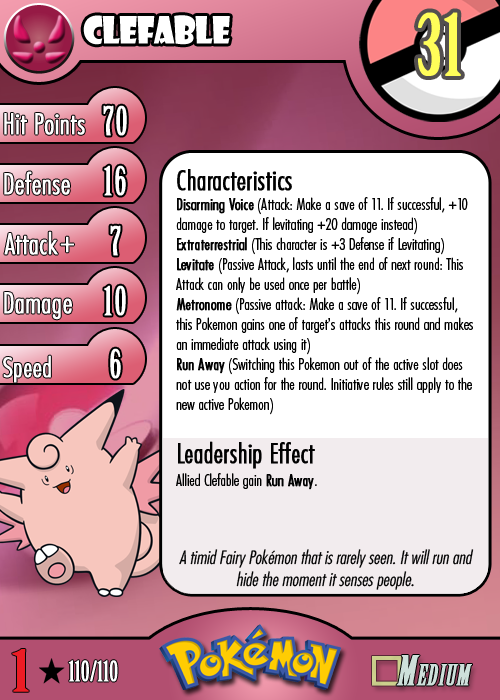
<style>
.page{position:relative;width:500px;height:700px;background:#ffffff}
.page>*{position:absolute;margin:0}
.t1{font:36.7px "ShowcardGothic-Reg";letter-spacing:-0.025em;color:#ffffff;scale:0.91 1}
.t2{font:83.3px "BirchStd";letter-spacing:0.025em;color:#fffd59;font-weight:bold}
.t3{font:27.8px "Futura-CondensedLight";color:#ffffff;font-weight:bold}
.t4{font:38.9px "BirchStd";letter-spacing:0.035em;color:#ffffff;font-weight:bold}
.t5{font:16.7px "FuturaCondensedBQ-Light";color:#010101}
.t6{font:27.8px "FuturaCondensedBQ-Light";color:#010101;font-weight:bold}
.t7{font:16.7px "FuturaCondensedBQ-Light";color:#010101;font-weight:bold}
.t8{font:30.6px "Futura-CondensedLight";color:#ffffff;font-weight:bold}
.t9{font:27.8px "FuturaCondensedBQ-Light";color:#ffffff;font-weight:bold}
.t10{font:18.1px "Futura-CondensedLight";color:#010101;font-style:italic}
.t11{font:55.6px "BirchStd";color:#ed1c24;font-weight:bold;scale:1.5 1}
.t12{font:27.8px "BirchStd";color:#ffffff;font-weight:bold}
</style>
<div class="page">
<p class="t1" style="left:83px;top:15px;width:147px;height:30px">clefable</p>
<p class="t2" style="left:418px;top:12px;width:43px;height:64px">31</p>
<p class="t3" style="left:4px;top:113px;width:81px;height:22px">Hit Points</p>
<p class="t4" style="left:103px;top:105px;width:24px;height:31px">70</p>
<p class="t3" style="left:4px;top:171px;width:66px;height:24px">Defense</p>
<p class="t4" style="left:104px;top:165px;width:22px;height:31px">16</p>
<p class="t5" style="left:176px;top:169px;width:297px;height:321px"><span class="t6">Characteristics<br></span><span class="t7">Disarming Voice</span> (Attack: Make a save of 11. If successful, +10 damage to target. If levitating +20 damage instead)<br><span class="t7">Extraterrestrial</span> (This character is +3 Defense if Levitating)<br><span class="t7">Levitate</span> (Passive Attack, lasts until the end of next round: This Attack can only be used once per battle)<br><span class="t7">Metronome</span> (Passive attack: Make a save of 11. If successful, this Pokemon gains one of target’s attacks this round and makes an immediate attack using it)<br><span class="t7">Run Away</span> (Switching this Pokemon out of the active slot does not use you action for the round. Initiative rules still apply to the new active Pokemon)<br><br><span class="t6">Leadership Effect<br></span>Allied Clefable gain <span class="t7">Run Away</span>.</p>
<p class="t3" style="left:4px;top:231px;width:54px;height:24px">Attack</p>
<p class="t4" style="left:110px;top:225px;width:11px;height:31px">7</p>
<p class="t8" style="left:60px;top:236px;width:14px;height:17px">+</p>
<p class="t3" style="left:4px;top:292px;width:68px;height:28px">Damage</p>
<p class="t4" style="left:104px;top:285px;width:22px;height:31px">10</p>
<p class="t4" style="left:110px;top:348px;width:11px;height:31px">6</p>
<p class="t9" style="left:3px;top:355px;width:48px;height:28px">Speed</p>
<p class="t10" style="left:179px;top:549px;width:295px;height:41px;text-align:center">A timid Fairy Pokémon that is rarely seen. It will run and hide the moment it senses people.</p>
<p class="t11" style="left:12px;top:649px;width:17px;height:43px">1</p>
<p class="t12" style="left:68px;top:660px;width:50px;height:22px">110/110</p>
</div>
